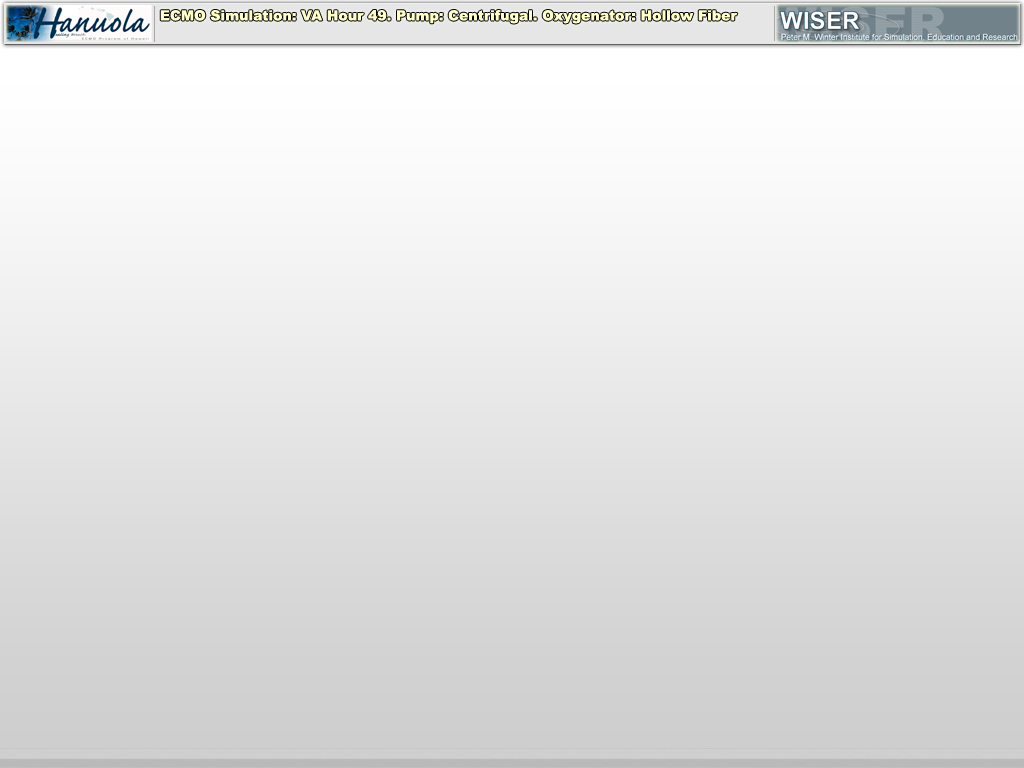
<style>
.page{position:relative;width:1024px;height:768px}
.page>*{position:absolute;margin:0}
.t1{font:14px "Arial-Black";color:#ffffc7}
</style>
<div class="page">
<p class="t1" style="left:160px;top:10px;width:578px;height:14px">ECMO Simulation: VA Hour 49. Pump: Centrifugal. Oxygenator: Hollow Fiber</p>
</div>
